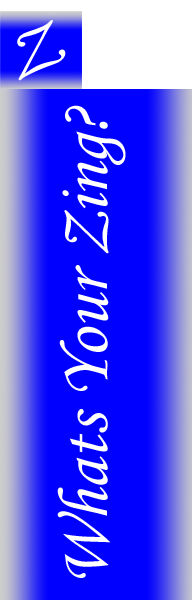
<style>
.page{position:relative;width:192px;height:600px;background:#0000ff}
.page>*{position:absolute;margin:0}
.t1{font:67.2px "MonotypeCorsiva";color:#ffffff;scale:1.38 1}
.t2{font:71.7px "MonotypeCorsiva";color:#ffffff}
</style>
<div class="page">
<p class="t1" style="left:17px;top:20px;width:49px;height:61px;rotate:-25deg">Z</p>
<p class="t2" style="left:57px;top:105px;width:69px;height:473px;rotate:-90deg">Whats Your Zing?</p>
</div>
